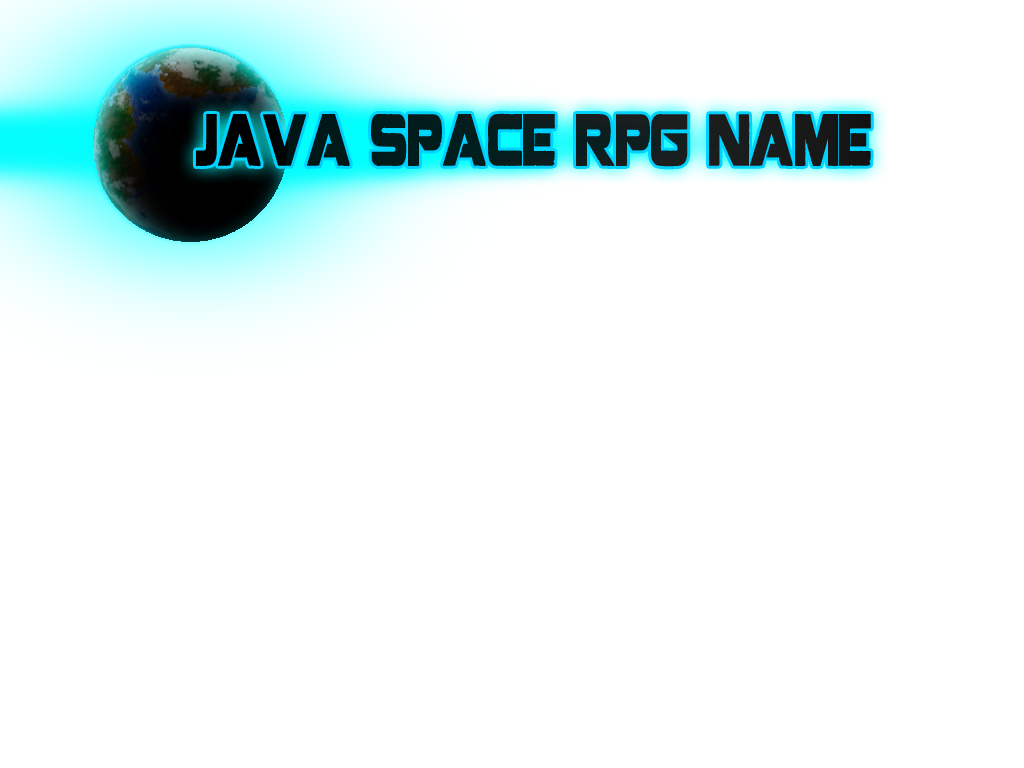
<style>
.page{position:relative;width:1024px;height:768px;background:#ffffff}
.page>*{position:absolute;margin:0}
.t1{font:71.5px "Coalition";color:#0c1c1c;text-transform:uppercase;font-weight:bold;scale:0.55 1}
</style>
<div class="page">
<p class="t1" style="left:196px;top:113px;width:675px;height:54px">java space rpg name</p>
</div>
